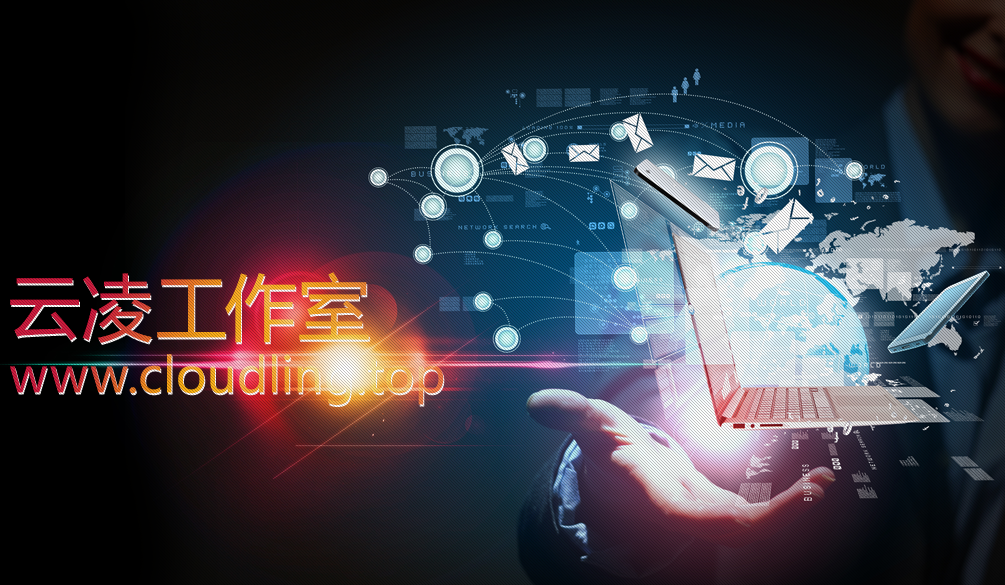
<style>
.page{position:relative;width:1005px;height:585px}
.page>*{position:absolute;margin:0}
.t1{font:48px/80px "MicrosoftYaHei";letter-spacing:0.025em}
.t2{font:72px/80px "MicrosoftYaHei";letter-spacing:0.025em}
</style>
<div class="page">
<p class="t1" style="left:10px;top:272px;width:434px;height:133px;text-align:center"><span class="t2">云凌工作室<br></span>     www.cloudling.top</p>
</div>
